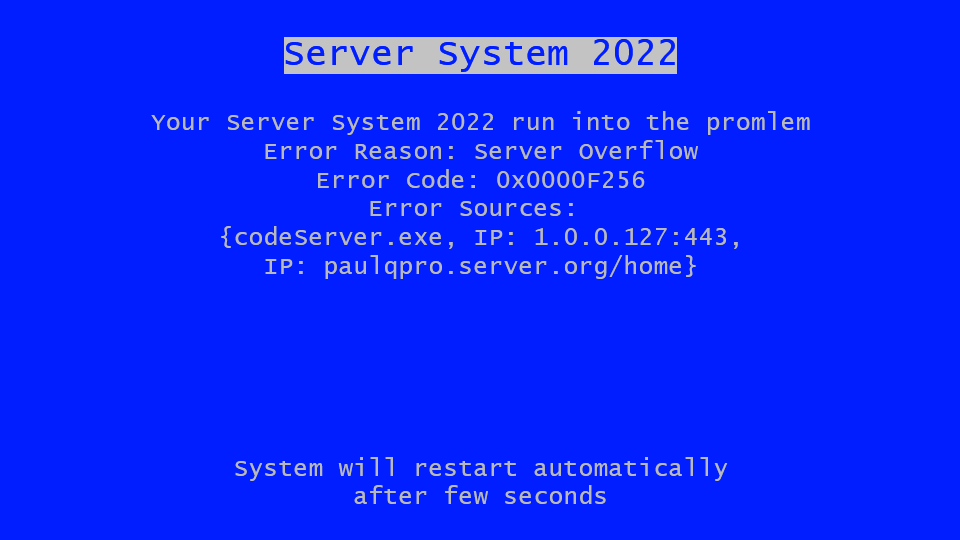
<style>
.page{position:relative;width:960px;height:540px;background:#001eff}
.page>*{position:absolute;margin:0}
.t1{font:24px "LucidaConsole";color:#b9b9b9}
</style>
<div class="page">
<p class="t1" style="left:151px;top:111px;width:659px;height:393px;text-align:center">Your Server System 2022 run into the promlem<br>Error Reason: Server Overflow<br>Error Code: 0x0000F256<br>Error Sources: <br>{codeServer.exe, IP: 1.0.0.127:443,<br>IP: paulqpro.server.org/home}<br><br><br><br><br><br><br>System will restart automatically<br>after few seconds</p>
</div>
